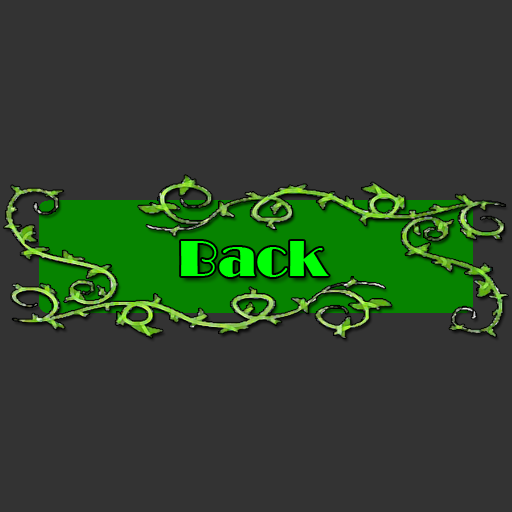
<style>
.page{position:relative;width:512px;height:512px;background:#333333}
.page>*{position:absolute;margin:0}
.t1{font:52.3px "Broadway";color:#00ff06;scale:1.05 1}
</style>
<div class="page">
<p class="t1" style="left:181px;top:241px;width:148px;height:36px">Back</p>
</div>
